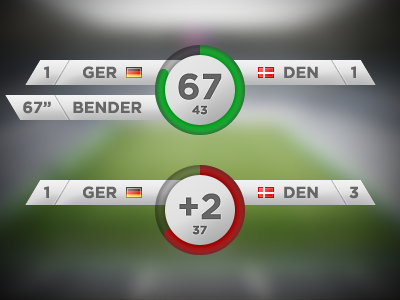
<style>
.page{position:relative;width:400px;height:300px}
.page>*{position:absolute;margin:0}
.t1{font:16px "Gotham-Bold";color:#666666}
.t2{font:36px "Gotham-Bold";color:#666666}
.t3{font:12px "Gotham-Bold";color:#666666}
</style>
<div class="page">
<p class="t1" style="left:44px;top:66px;width:5px;height:12px">1</p>
<p class="t1" style="left:83px;top:66px;width:34px;height:13px">GER</p>
<p class="t2" style="left:178px;top:73px;width:44px;height:27px">67</p>
<p class="t1" style="left:284px;top:66px;width:34px;height:12px">DEN</p>
<p class="t1" style="left:351px;top:66px;width:5px;height:12px">1</p>
<p class="t1" style="left:23px;top:101px;width:28px;height:13px">67”</p>
<p class="t1" style="left:73px;top:101px;width:69px;height:12px">BENDER</p>
<p class="t3" style="left:192px;top:105px;width:15px;height:10px">43</p>
<p class="t1" style="left:44px;top:186px;width:5px;height:12px">1</p>
<p class="t1" style="left:83px;top:186px;width:34px;height:13px">GER</p>
<p class="t2" style="left:179px;top:193px;width:42px;height:27px">+2</p>
<p class="t1" style="left:284px;top:186px;width:34px;height:12px">DEN</p>
<p class="t1" style="left:349px;top:186px;width:10px;height:13px">3</p>
<p class="t3" style="left:192px;top:225px;width:15px;height:10px">37</p>
</div>
